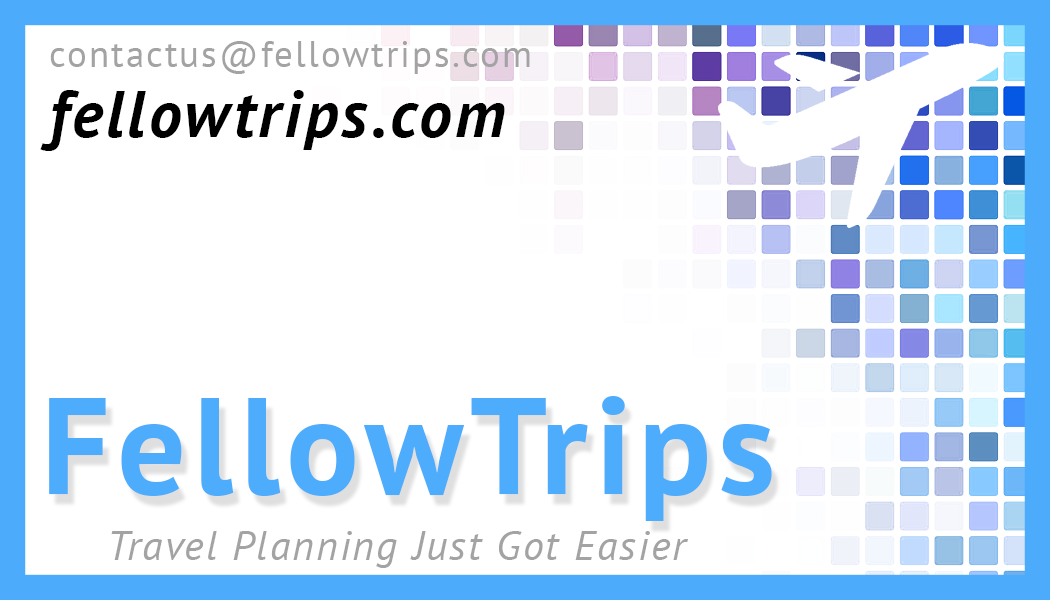
<style>
.page{position:relative;width:1050px;height:600px;background:#ffffff}
.page>*{position:absolute;margin:0}
.t1{font:37.4px "PTSans-Regular";letter-spacing:0.05em;color:#a3a3a3}
.t2{font:65.9px "PTSans-BoldItalic";letter-spacing:0.05em;color:#000000}
.t3{font:136.6px "PTSans-Bold";letter-spacing:0.05em;color:#4eacfc}
.t4{font:41.1px "PTSans-Italic";letter-spacing:0.05em;color:#a3a3a3}
</style>
<div class="page">
<p class="t1" style="left:50px;top:41px;width:480px;height:33px">contactus@fellowtrips.com</p>
<p class="t2" style="left:40px;top:90px;width:465px;height:61px">fellowtrips.com</p>
<p class="t3" style="left:49px;top:396px;width:723px;height:125px">FellowTrips</p>
<p class="t4" style="left:111px;top:531px;width:577px;height:37px">Travel Planning Just Got Easier</p>
</div>
